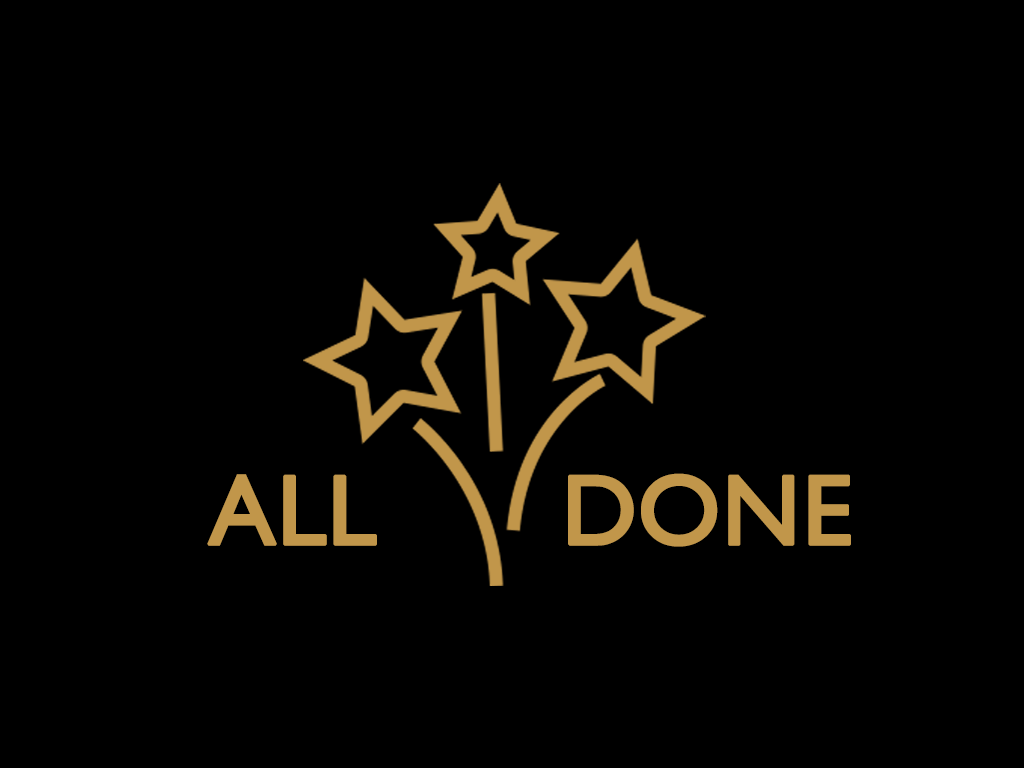
<style>
.page{position:relative;width:1024px;height:768px;background:#000000}
.page>*{position:absolute;margin:0}
.t1{font:100px "GillSans";color:#c1964a;font-weight:bold}
</style>
<div class="page">
<p class="t1" style="left:207px;top:473px;width:644px;height:74px">ALL      DONE</p>
</div>
